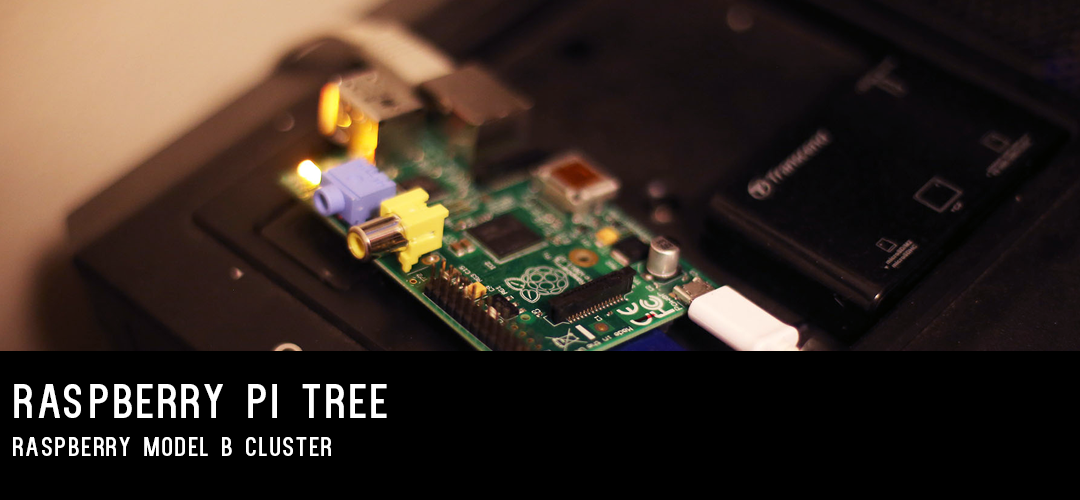
<style>
.page{position:relative;width:1080px;height:500px;background:#000000}
.page>*{position:absolute;margin:0}
.t1{font:48px "Kenzo";letter-spacing:0.08em;color:#ffffff}
.t2{font:27px "Kenzo";letter-spacing:0.08em;color:#ffffff}
</style>
<div class="page">
<p class="t1" style="left:14px;top:384px;width:373px;height:34px">Raspberry Pi TREE</p>
<p class="t2" style="left:13px;top:437px;width:318px;height:19px">RaSpberry Model B Cluster</p>
</div>
